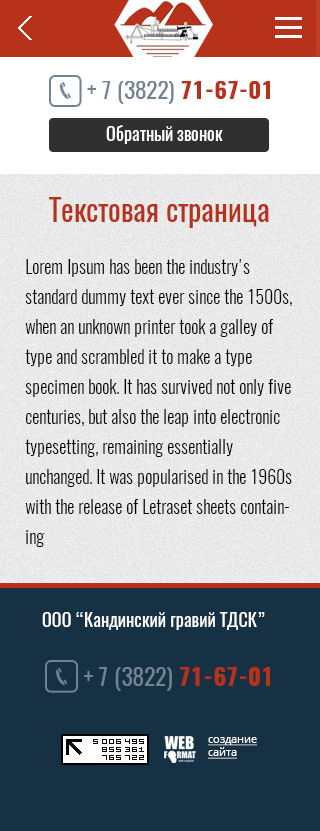
<style>
.page{position:relative;width:320px;height:831px;background:#163044}
.page>*{position:absolute;margin:0}
.t1{font:23.3px "Oswald-Regular";color:#728392}
.t2{font:23.3px "Oswald-Bold";color:#b8311b}
.t3{font:18px "Oswald-Regular";color:#ffffff}
.t4{font:30px "Oswald-Regular";color:#b8311b}
.t5{font:18px/30px "Oswald-Light";color:#000000}
.t6{font:23.9px "Oswald-Regular";color:#728392}
.t7{font:23.9px "Oswald-Bold";color:#b8311b}
.t8{font:11px "OpenSans";color:#ffffff;text-decoration:underline}
</style>
<div class="page">
<p class="t1" style="left:87px;top:81px;width:183px;height:23px">+ 7 (3822) <span class="t2">71-67-01</span></p>
<p class="t3" style="left:106px;top:125px;width:117px;height:19px">Обратный звонок</p>
<p class="t4" style="left:49px;top:197px;width:220px;height:31px">Текстовая страница</p>
<p class="t5" style="left:25px;top:259px;width:267px;height:288px">Lorem Ipsum has been the industry's standard dummy text ever since the 1500s, when an unknown printer took a galley of type and scrambled it to make a type specimen book. It has survived not only five centuries, but also the leap into electronic typesetting, remaining essentially unchanged. It was popularised in the 1960s with the release of Letraset sheets containing</p>
<p class="t3" style="left:42px;top:612px;width:223px;height:18px">ООО “Кандинский гравий ТДСК”</p>
<p class="t6" style="left:84px;top:667px;width:186px;height:24px">+ 7 (3822) <span class="t7">71-67-01</span></p>
<p class="t8" style="left:208px;top:737px;width:49px;height:22px">создание<br>сайта</p>
</div>
